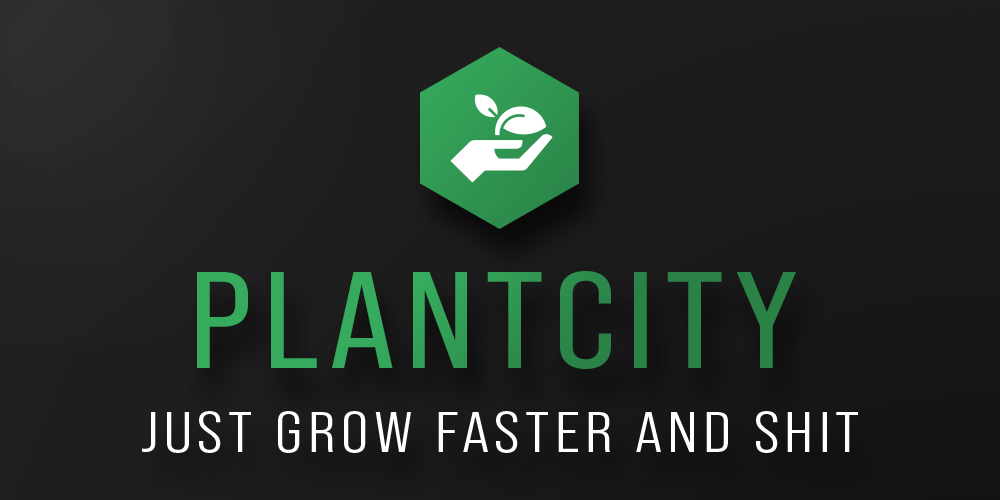
<style>
.page{position:relative;width:1000px;height:500px}
.page>*{position:absolute;margin:0}
.t1{font:136.9px "BebasNeuePro-Regular";letter-spacing:0.06em;text-transform:uppercase;scale:1.2 1}
.t2{font:57.3px "BebasNeuePro-Middle";letter-spacing:0.08em;color:#ffffff;text-transform:uppercase;scale:1.2 1}
</style>
<div class="page">
<p class="t1" style="left:197px;top:271px;width:599px;height:98px">PlantCity</p>
<p class="t2" style="left:142px;top:411px;width:716px;height:42px">just grow faster and shit</p>
</div>
